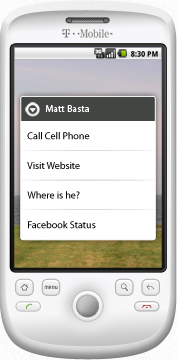
<style>
.page{position:relative;width:177px;height:360px;background:#ffffff}
.page>*{position:absolute;margin:0}
.t1{font:7.3px "DroidSans-Bold";letter-spacing:0.005em;color:#000000}
.t2{font:10px "MyriadPro-Regular";color:#ffffff}
.t3{font:10px "MyriadPro-Regular";color:#000000}
</style>
<div class="page">
<p class="t1" style="left:131px;top:51px;width:27px;height:6px">8:30 PM</p>
<p class="t2" style="left:45px;top:105px;width:44px;height:7px">Matt Basta</p>
<p class="t3" style="left:27px;top:132px;width:63px;height:8px">Call Cell Phone</p>
<p class="t3" style="left:27px;top:161px;width:53px;height:8px">Visit Website</p>
<p class="t3" style="left:27px;top:191px;width:53px;height:8px">Where is he?</p>
<p class="t3" style="left:28px;top:221px;width:68px;height:8px">Facebook Status</p>
</div>
